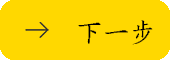
<style>
.page{position:relative;width:170px;height:60px;background:#ffd800}
.page>*{position:absolute;margin:0}
.t1{font:26.7px "¿¬Ìå";color:#000000}
</style>
<div class="page">
<p class="t1" style="left:78px;top:20px;width:75px;height:25px">下一步</p>
</div>
